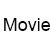
<style>
.page{position:relative;width:51px;height:50px;background:#ffffff}
.page>*{position:absolute;margin:0}
.t1{font:18px "ArialMT";color:#080808}
</style>
<div class="page">
<p class="t1" style="left:4px;top:18px;width:47px;height:13px">Movie</p>
</div>
